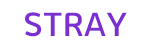
<style>
.page{position:relative;width:150px;height:50px;background:#ffffff}
.page>*{position:absolute;margin:0}
.t1{font:33.3px "GyeonggiTitleMOTF";color:#7b2fd1}
</style>
<div class="page">
<p class="t1" style="left:25px;top:12px;width:102px;height:25px">STRAY</p>
</div>
